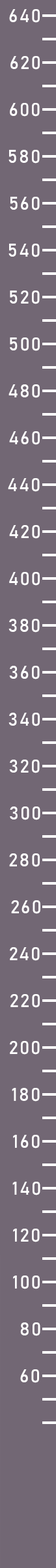
<style>
.page{position:relative;width:56px;height:1568px;background:#726774}
.page>*{position:absolute;margin:0}
.t1{font:18.2px "Bahnschrift";letter-spacing:0.075em;color:#ffffff}
</style>
<div class="page">
<p class="t1" style="left:9px;top:9px;width:31px;height:14px">640</p>
<p class="t1" style="left:10px;top:56px;width:30px;height:14px">620</p>
<p class="t1" style="left:10px;top:103px;width:30px;height:14px">600</p>
<p class="t1" style="left:8px;top:150px;width:32px;height:14px">580</p>
<p class="t1" style="left:10px;top:197px;width:30px;height:13px">560</p>
<p class="t1" style="left:8px;top:244px;width:32px;height:13px">540</p>
<p class="t1" style="left:10px;top:291px;width:30px;height:13px">520</p>
<p class="t1" style="left:10px;top:337px;width:30px;height:14px">500</p>
<p class="t1" style="left:8px;top:384px;width:32px;height:14px">480</p>
<p class="t1" style="left:9px;top:431px;width:31px;height:14px">460</p>
<p class="t1" style="left:8px;top:478px;width:32px;height:14px">440</p>
<p class="t1" style="left:9px;top:525px;width:31px;height:14px">420</p>
<p class="t1" style="left:9px;top:572px;width:31px;height:14px">400</p>
<p class="t1" style="left:8px;top:619px;width:32px;height:14px">380</p>
<p class="t1" style="left:9px;top:666px;width:31px;height:13px">360</p>
<p class="t1" style="left:8px;top:713px;width:32px;height:13px">340</p>
<p class="t1" style="left:9px;top:760px;width:31px;height:13px">320</p>
<p class="t1" style="left:10px;top:806px;width:30px;height:14px">300</p>
<p class="t1" style="left:9px;top:853px;width:31px;height:14px">280</p>
<p class="t1" style="left:11px;top:900px;width:29px;height:14px">260</p>
<p class="t1" style="left:10px;top:947px;width:30px;height:14px">240</p>
<p class="t1" style="left:10px;top:994px;width:30px;height:14px">220</p>
<p class="t1" style="left:10px;top:1041px;width:30px;height:14px">200</p>
<p class="t1" style="left:12px;top:1088px;width:28px;height:14px">180</p>
<p class="t1" style="left:13px;top:1135px;width:27px;height:13px">160</p>
<p class="t1" style="left:12px;top:1182px;width:28px;height:13px">140</p>
<p class="t1" style="left:13px;top:1229px;width:27px;height:13px">120</p>
<p class="t1" style="left:13px;top:1276px;width:27px;height:13px">100</p>
<p class="t1" style="left:20px;top:1322px;width:20px;height:14px">80</p>
<p class="t1" style="left:20px;top:1369px;width:19px;height:14px">60</p>
</div>
